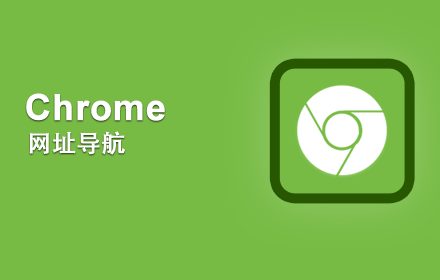
<style>
.page{position:relative;width:440px;height:280px;background:#77bb44}
.page>*{position:absolute;margin:0}
.t1{font:36px "Arial-BoldMT";color:#ffffff;font-weight:bold}
.t2{font:24px "AdobeHeitiStd-Regular";color:#ffffff;font-weight:bold}
</style>
<div class="page">
<p class="t1" style="left:26px;top:93px;width:139px;height:28px">Chrome</p>
<p class="t2" style="left:29px;top:131px;width:96px;height:24px">网址导航</p>
</div>
